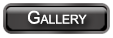
<style>
.page{position:relative;width:113px;height:38px;background:#ffffff}
.page>*{position:absolute;margin:0}
.t1{font:17.5px "ArialMT";color:#ffffff;font-variant:small-caps}
</style>
<div class="page">
<p class="t1" style="left:28px;top:10px;width:59px;height:14px">Gallery</p>
</div>
